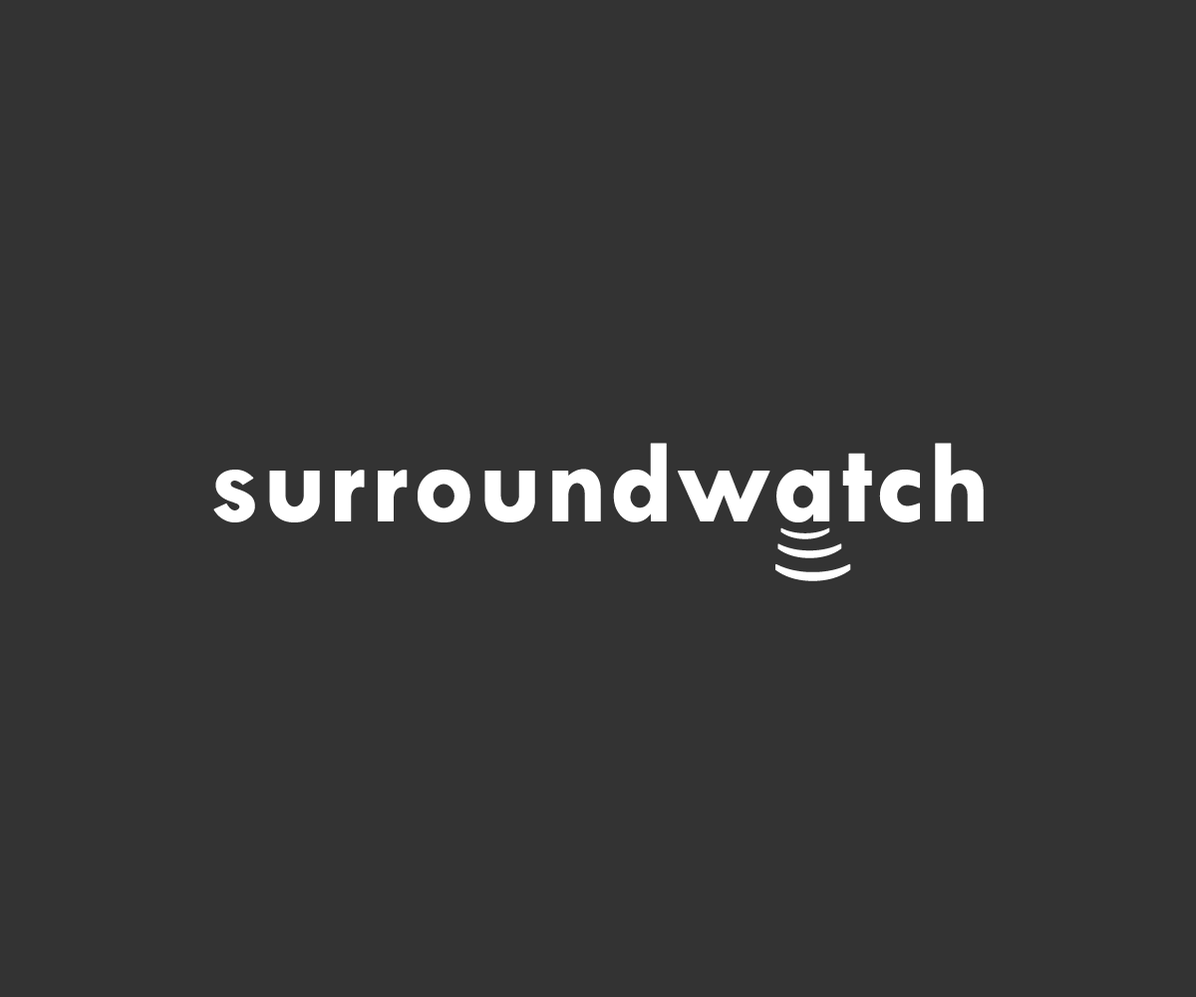
<style>
.page{position:relative;width:1196px;height:997px;background:#333333}
.page>*{position:absolute;margin:0}
.t1{font:118.6px "TwCenMT-Bold";color:#ffffff;font-weight:bold}
.t2{font:49.4px "PublicaPlay-Regular";color:#ffffff;font-weight:bold}
.t3{font:64.8px "PublicaPlay-Regular";color:#ffffff;font-weight:bold}
.t4{font:76.5px "PublicaPlay-Regular";color:#ffffff;font-weight:bold}
</style>
<div class="page">
<p class="t1" style="left:213px;top:443px;width:771px;height:79px">surroundwatch</p>
<p class="t2" style="left:776px;top:527px;width:75px;height:54px;rotate:90deg">)<span class="t3">)</span><span class="t4">)</span></p>
</div>
